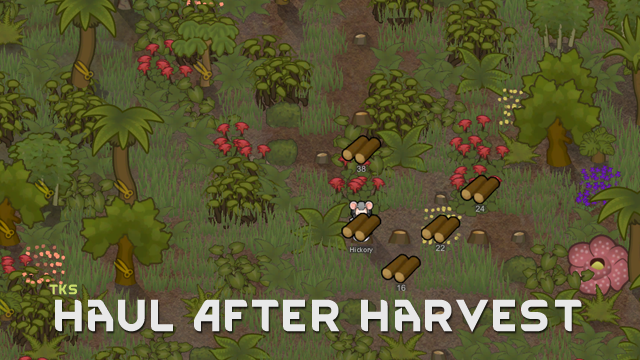
<style>
.page{position:relative;width:640px;height:360px}
.page>*{position:absolute;margin:0}
.t1{font:12px "RimWordFont";color:#cadb6a}
.t2{font:38.2px "RimWordFont";color:#e8e8e8}
</style>
<div class="page">
<p class="t1" style="left:49px;top:284px;width:28px;height:11px">tks</p>
<p class="t2" style="left:55px;top:299px;width:527px;height:34px">Haul After Harvest</p>
</div>
